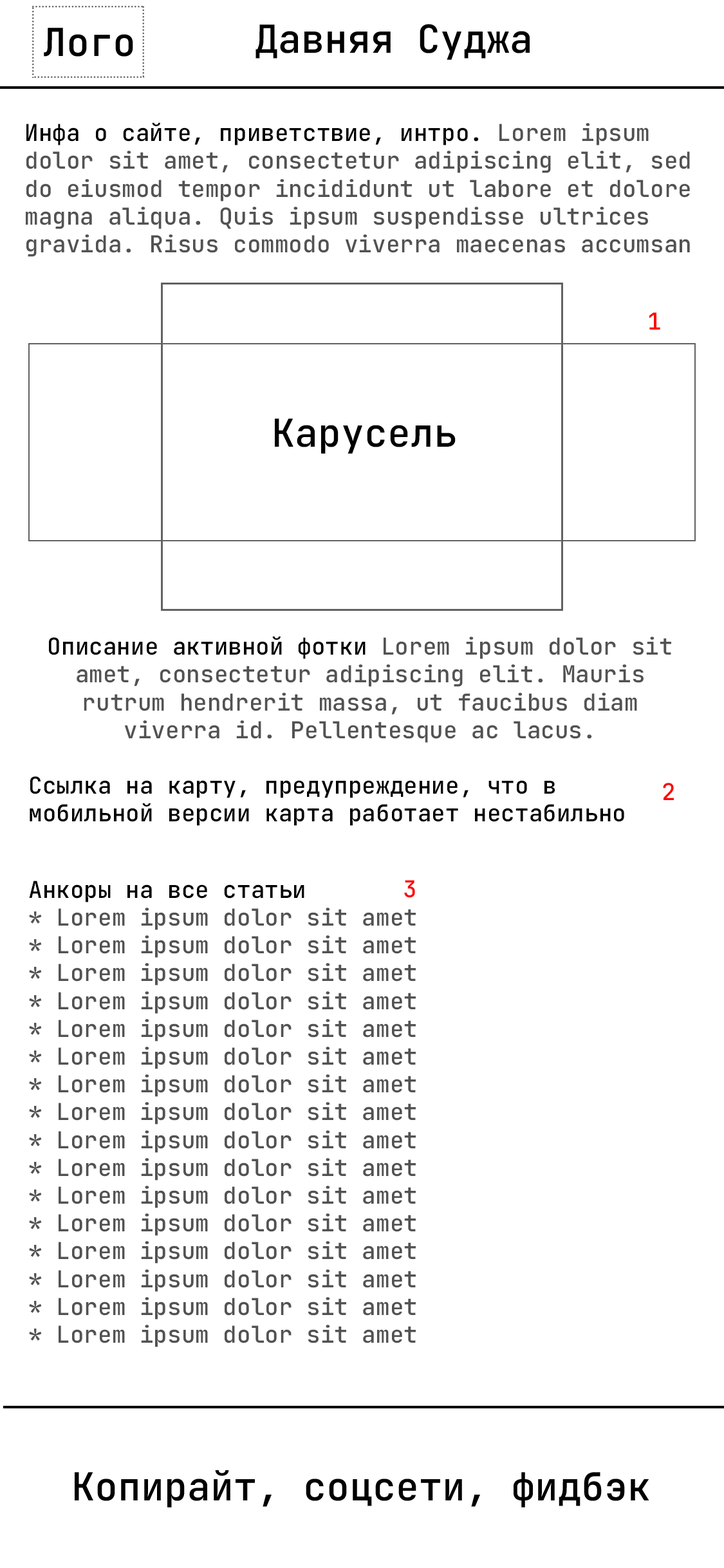
<style>
.page{position:relative;width:724px;height:1568px;background:#ffffff}
.page>*{position:absolute;margin:0}
.t1{font:23.2px "JetBrainsMono-Medium";color:#525252}
.t2{font:23.2px "JetBrainsMono-Medium";color:#000000}
.t3{font:23.2px "JetBrainsMono-Medium";color:#820101}
.t4{font:23.2px "JetBrainsMono-Medium";color:#ff0404}
.t5{font:38.6px "JetBrainsMono-Medium";color:#000000}
</style>
<div class="page">
<p class="t1" style="left:26px;top:122px;width:664px;height:135px"><span class="t2">Инфа о сайте, приветствие, интро. </span>Lorem ipsum dolor sit amet, consectetur adipiscing elit, sed do eiusmod tempor incididunt ut labore et dolore magna aliqua. Quis ipsum suspendisse ultrices gravida. Risus commodo viverra maecenas accumsan<span class="t3"> lacus vel facilisis.</span></p>
<p class="t4" style="left:649px;top:312px;width:11px;height:18px">1</p>
<p class="t5" style="left:275px;top:418px;width:181px;height:36px">Карусель</p>
<p class="t1" style="left:30px;top:636px;width:641px;height:190px;text-align:center"><span class="t2">Описание активной фотки </span>Lorem ipsum dolor sit amet, consectetur adipiscing elit. Mauris rutrum hendrerit massa, ut faucibus diam viverra id. Pellentesque ac lacus.<span class="t2"> <br> <br>Ссылка на карту, предупреждение, что в мобильной версии карта работает нестабильно</span></p>
<p class="t4" style="left:663px;top:783px;width:11px;height:17px">2</p>
<p class="t1" style="left:29px;top:881px;width:387px;height:466px"><span class="t2">Анкоры на все статьи<br></span>* Lorem ipsum dolor sit amet<br>* Lorem ipsum dolor sit amet<br>* Lorem ipsum dolor sit amet<br>* Lorem ipsum dolor sit amet<br>* Lorem ipsum dolor sit amet<br>* Lorem ipsum dolor sit amet<br>* Lorem ipsum dolor sit amet<br>* Lorem ipsum dolor sit amet<br>* Lorem ipsum dolor sit amet<br>* Lorem ipsum dolor sit amet<br>* Lorem ipsum dolor sit amet<br>* Lorem ipsum dolor sit amet<br>* Lorem ipsum dolor sit amet<br>* Lorem ipsum dolor sit amet<br>* Lorem ipsum dolor sit amet<br>* Lorem ipsum dolor sit amet</p>
<p class="t4" style="left:404px;top:880px;width:11px;height:18px">3</p>
</div>
